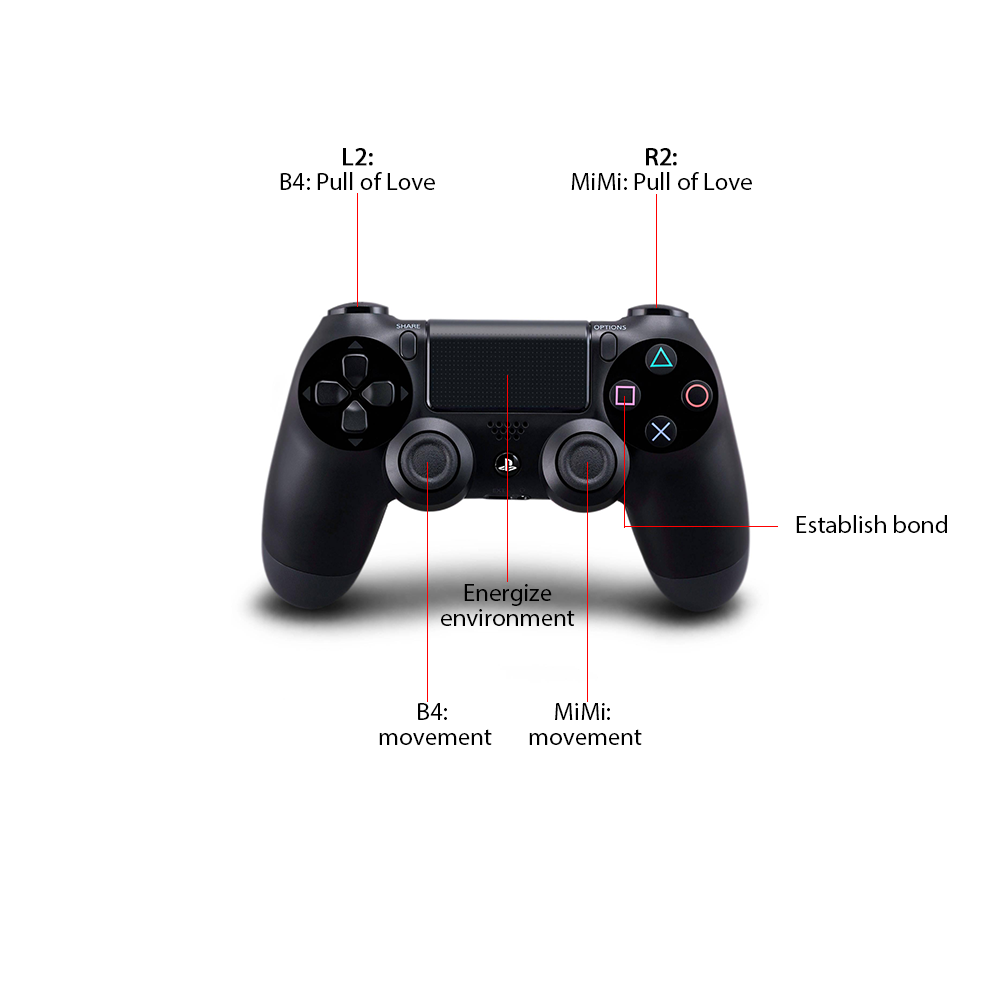
<style>
.page{position:relative;width:1000px;height:1000px;background:#ffffff}
.page>*{position:absolute;margin:0}
.t1{font:25px/25px "MyriadPro-Regular";color:#000000}
.t2{font:25px/25px "MyriadPro-Regular";color:#000000;font-weight:bold}
.t3{font:25px "MyriadPro-Regular";color:#000000}
</style>
<div class="page">
<p class="t1" style="left:280px;top:148px;width:155px;height:42px;text-align:center"><span class="t2">L2: <br></span>B4: Pull of Love</p>
<p class="t1" style="left:571px;top:148px;width:181px;height:42px;text-align:center"><span class="t2">R2: <br></span>MiMi: Pull of Love</p>
<p class="t3" style="left:796px;top:515px;width:151px;height:18px">Establish bond</p>
<p class="t1" style="left:441px;top:584px;width:134px;height:42px;text-align:center">Energize <br>environment</p>
<p class="t1" style="left:379px;top:703px;width:113px;height:42px;text-align:center">B4: <br> movement</p>
<p class="t1" style="left:529px;top:703px;width:113px;height:42px;text-align:center">MiMi:<br> movement</p>
</div>
